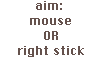
<style>
.page{position:relative;width:102px;height:68px;background:#ffffff}
.page>*{position:absolute;margin:0}
.t1{font:12.4px "ChicagoFLF";color:#65524d}
</style>
<div class="page">
<p class="t1" style="left:18px;top:1px;width:66px;height:56px;text-align:center">aim: <br>mouse<br>OR<br>right stick</p>
</div>
